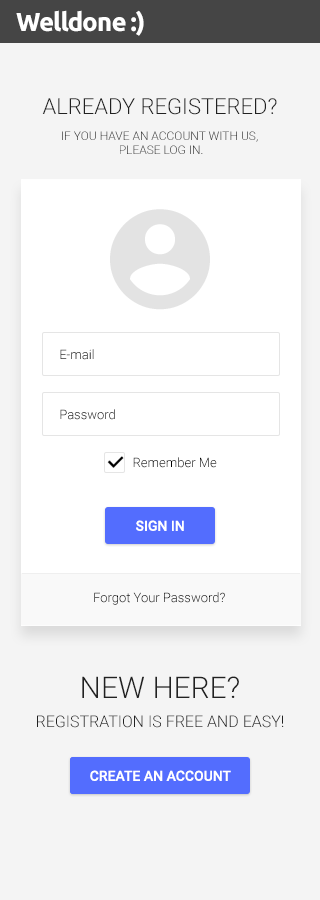
<style>
.page{position:relative;width:320px;height:900px;background:#f4f4f4}
.page>*{position:absolute;margin:0}
.t1{font:26px "Ubuntu-Bold";letter-spacing:-0.04em;color:#ffffff}
.t2{font:22px "Roboto-Light";color:#212121;text-transform:uppercase}
.t3{font:12px/14px "Roboto-Light";text-transform:uppercase}
.t4{font:13px "Roboto-Light"}
.t5{font:13px "Roboto-Light";color:#000000}
.t6{font:14px "Roboto-Medium";color:#ffffff;text-transform:uppercase}
.t7{font:30px "Roboto-Light";color:#212121;text-transform:uppercase}
.t8{font:16px "Roboto-Light";color:#212121;text-transform:uppercase}
</style>
<div class="page">
<p class="t1" style="left:16px;top:10px;width:128px;height:26px">Welldone :)</p>
<p class="t2" style="left:42px;top:98px;width:235px;height:17px">Already Registered?</p>
<p class="t3" style="left:62px;top:131px;width:196px;height:23px;text-align:center">If you have an account with us, <br>please log in.</p>
<p class="t4" style="left:60px;top:349px;width:34px;height:11px">E-mail</p>
<p class="t4" style="left:60px;top:409px;width:55px;height:11px">Password</p>
<p class="t5" style="left:133px;top:457px;width:84px;height:11px">Remember Me</p>
<p class="t6" style="left:136px;top:520px;width:48px;height:11px">Sign In</p>
<p class="t5" style="left:94px;top:592px;width:131px;height:13px">Forgot Your Password?</p>
<p class="t7" style="left:82px;top:676px;width:157px;height:22px">New Here?</p>
<p class="t8" style="left:37px;top:715px;width:247px;height:13px">Registration is free and easy!</p>
<p class="t6" style="left:90px;top:770px;width:141px;height:11px">create an account</p>
</div>
